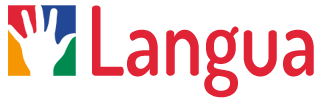
<style>
.page{position:relative;width:324px;height:102px;background:#ffffff}
.page>*{position:absolute;margin:0}
.t1{font:96px "Dosis-SemiBold";color:#e12336;scale:0.83 1}
</style>
<div class="page">
<p class="t1" style="left:92px;top:5px;width:222px;height:93px">Langua</p>
</div>
